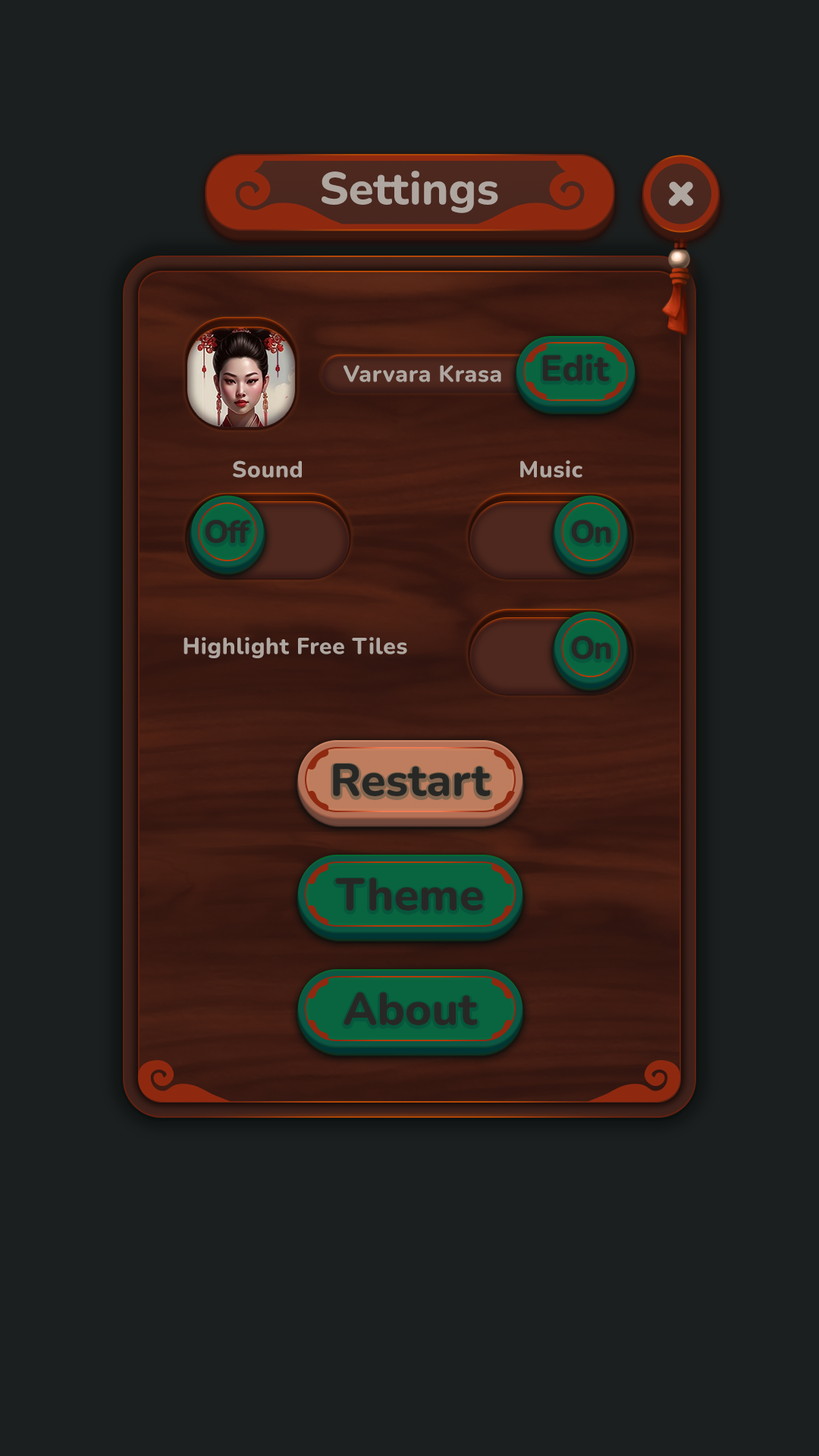
<style>
.page{position:relative;width:819px;height:1456px;background:#1c1f1f}
.page>*{position:absolute;margin:0}
.t1{font:45.5px "Nunito-ExtraBold";color:#afa6a0}
.t2{font:22.7px "Nunito-ExtraBold";letter-spacing:0.025em;color:#afa6a0}
.t3{font:36.4px "Nunito-ExtraBold";color:#272825}
.t4{font:31.8px "Nunito-ExtraBold";letter-spacing:-0.05em;color:#272825}
.t5{font:45.5px "Nunito-ExtraBold";color:#272825}
</style>
<div class="page">
<p class="t1" style="left:322px;top:171px;width:176px;height:42px">Settings</p>
<p class="t2" style="left:344px;top:365px;width:157px;height:17px">Varvara Krasa</p>
<p class="t3" style="left:542px;top:354px;width:68px;height:27px">Edit</p>
<p class="t2" style="left:233px;top:460px;width:69px;height:18px">Sound</p>
<p class="t2" style="left:520px;top:460px;width:62px;height:18px">Music</p>
<p class="t4" style="left:205px;top:519px;width:45px;height:25px">Off</p>
<p class="t4" style="left:571px;top:519px;width:40px;height:25px">On</p>
<p class="t2" style="left:184px;top:637px;width:223px;height:21px">Highlight Free Tiles</p>
<p class="t4" style="left:571px;top:635px;width:40px;height:25px">On</p>
<p class="t5" style="left:333px;top:764px;width:158px;height:32px">Restart</p>
<p class="t5" style="left:335px;top:877px;width:148px;height:34px">Theme</p>
<p class="t5" style="left:344px;top:992px;width:134px;height:33px">About</p>
</div>
